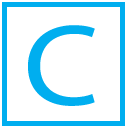
<style>
.page{position:relative;width:128px;height:128px;background:#ffffff}
.page>*{position:absolute;margin:0}
.t1{font:115.7px "MyriadPro-Regular";color:#00aeef;scale:1.12 1}
</style>
<div class="page">
<p class="t1" style="left:28px;top:25px;width:67px;height:81px">С</p>
</div>
